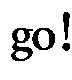
<style>
.page{position:relative;width:72px;height:80px;background:#ffffff}
.page>*{position:absolute;margin:0}
.t1{font:52px "CrimsonText-SemiBold";letter-spacing:-0.025em;color:#000000}
.t2{font:52px "CrimsonText-SemiBold";letter-spacing:0.08em;color:#000000}
.t3{font:61.3px "CrimsonText-SemiBold";letter-spacing:0.015em;color:#000000}
</style>
<div class="page">
<p class="t1" style="left:11px;top:12px;width:59px;height:49px">g<span class="t2">o</span><span class="t3">!</span></p>
</div>
